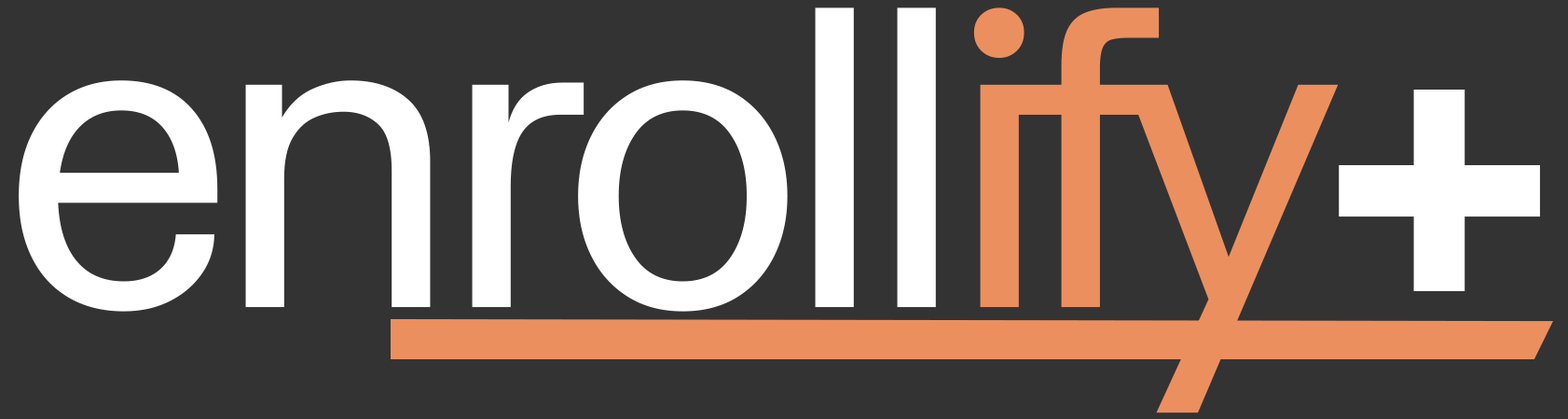
<style>
.page{position:relative;width:1568px;height:419px;background:#333333}
.page>*{position:absolute;margin:0}
.t1{font:426.7px "HedvigLettersSans-Regular";letter-spacing:-0.06em;color:#ffffff}
.t2{font:426.7px "HedvigLettersSans-Regular";letter-spacing:-0.1em;color:#ec8f5e}
.t3{font:426.7px "Impact";letter-spacing:-0.06em;color:#ffffff}
</style>
<div class="page">
<p class="t1" style="left:19px;top:7px;width:1320px;height:406px">enroll<span class="t2">ify</span></p>
<p class="t3" style="left:1339px;top:89px;width:201px;height:202px">+</p>
</div>
